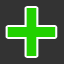
<style>
.page{position:relative;width:64px;height:64px;background:#333333}
.page>*{position:absolute;margin:0}
.t1{font:100px "SegoeUI-Bold";letter-spacing:-0.007em;color:#22d100}
</style>
<div class="page">
<p class="t1" style="left:7px;top:8px;width:49px;height:48px">+</p>
</div>
